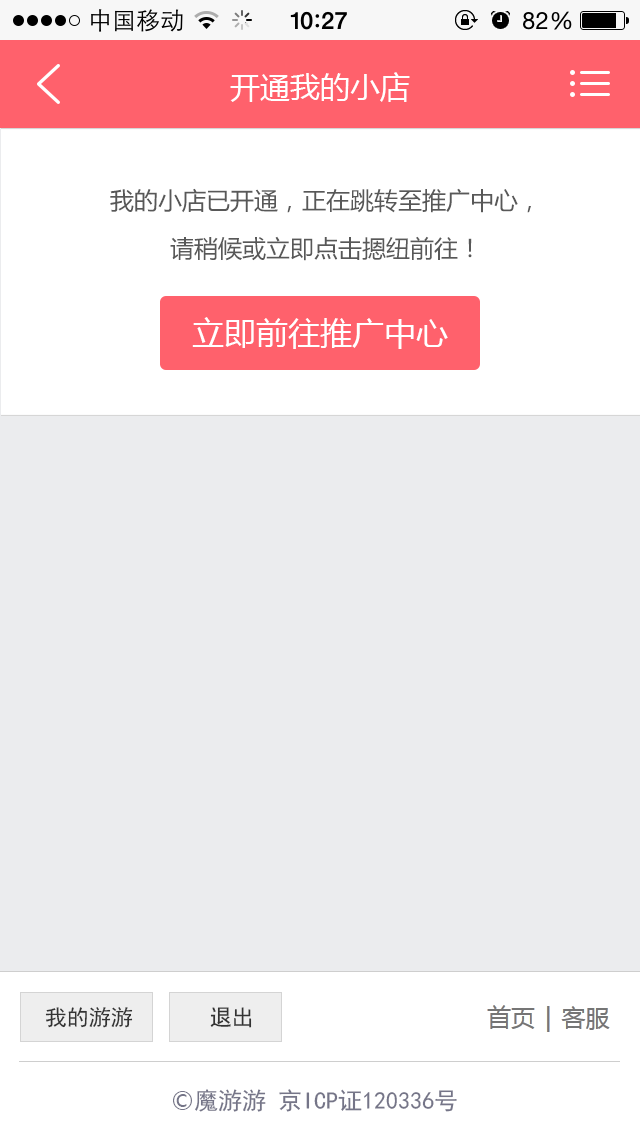
<style>
.page{position:relative;width:640px;height:1136px;background:#ebecee}
.page>*{position:absolute;margin:0}
.t1{font:30px "MicrosoftYaHei";color:#ffffff}
.t2{font:24px/48px "MicrosoftYaHei";color:#585858}
.t3{font:32px "MicrosoftYaHei";color:#ffffff}
.t4{font:22px "SimHei";color:#333333}
.t5{font:24px "SimHei";color:#757588}
.t6{font:24px "MicrosoftYaHei";color:#757588}
</style>
<div class="page">
<p class="t1" style="left:230px;top:72px;width:180px;height:30px">开通我的小店</p>
<p class="t2" style="left:110px;top:188px;width:421px;height:73px;text-align:center">我的小店已开通，正在跳转至推广中心，<br>请稍候或立即点击摁纽前往！</p>
<p class="t3" style="left:192px;top:317px;width:256px;height:32px">立即前往推广中心</p>
<p class="t4" style="left:45px;top:1007px;width:207px;height:21px">我的游游       退出</p>
<p class="t5" style="left:173px;top:1089px;width:284px;height:23px"><span class="t6">©</span>魔游游 京ICP证120336号</p>
</div>
